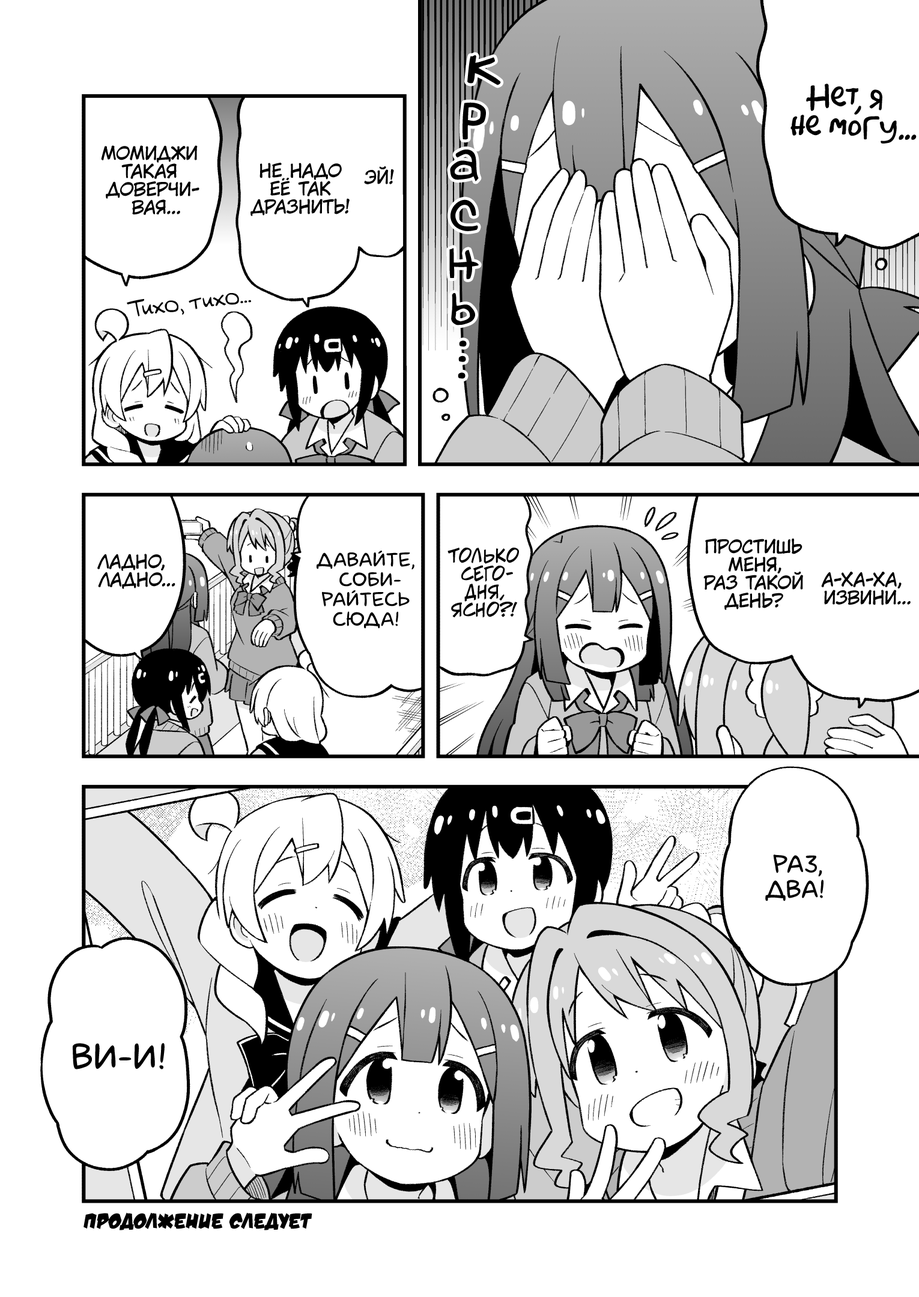
<style>
.page{position:relative;width:919px;height:1297px;background:#ffffff}
.page>*{position:absolute;margin:0}
.t1{font:64.9px "v_Augie";color:#000000}
.t2{font:28.8px "AkbarPlain";color:#000000}
.t3{font:59.5px "v_Augie";color:#000000}
.t4{font:18px "KuraiVoice2";color:#000000;text-transform:uppercase}
.t5{font:21.6px "v_Augie";color:#000000}
.t6{font:19.8px "laCartoonerie";color:#000000;text-transform:uppercase}
.t7{font:18px "v_CCJeffCampbell";color:#000000;text-transform:uppercase}
.t8{font:25.2px "laCartoonerie";color:#000000;text-transform:uppercase}
.t9{font:36px "laCartoonerie";color:#000000;text-transform:uppercase}
.t10{font:21.6px "v_DamnNoisyKids";color:#000000;text-transform:uppercase}
</style>
<div class="page">
<p class="t1" style="left:467px;top:55px;width:34px;height:30px;rotate:5deg">к</p>
<p class="t2" style="left:790px;top:83px;width:127px;height:61px;text-align:center">Нет, я<br>не могу...</p>
<p class="t3" style="left:463px;top:102px;width:23px;height:38px;rotate:7deg">р</p>
<p class="t4" style="left:101px;top:145px;width:98px;height:70px;text-align:center">Момиджи<br>такая<br>доверчи-<br>вая...</p>
<p class="t3" style="left:450px;top:150px;width:29px;height:31px;rotate:6deg">а</p>
<p class="t4" style="left:250px;top:163px;width:100px;height:53px;text-align:center">Не надо<br>её так<br>дразнить!</p>
<p class="t4" style="left:364px;top:166px;width:30px;height:18px">Эй!</p>
<p class="t3" style="left:451px;top:199px;width:27px;height:32px">с</p>
<p class="t3" style="left:449px;top:248px;width:30px;height:31px">н</p>
<p class="t5" style="left:127px;top:293px;width:124px;height:24px;rotate:-7deg">Тихо, тихо...</p>
<p class="t3" style="left:451px;top:293px;width:24px;height:33px">ь</p>
<p class="t3" style="left:459px;top:341px;width:8px;height:6px">.</p>
<p class="t3" style="left:458px;top:356px;width:8px;height:6px">.</p>
<p class="t3" style="left:458px;top:372px;width:8px;height:7px">.</p>
<p class="t4" style="left:703px;top:538px;width:100px;height:72px;text-align:center">Простишь<br>меня,<br>раз такой<br>день?</p>
<p class="t4" style="left:97px;top:554px;width:78px;height:35px;text-align:center">Ладно,<br>ладно...</p>
<p class="t6" style="left:317px;top:551px;width:97px;height:78px;text-align:center">Давайте,<br>соби-<br>райтесь<br>сюда!</p>
<p class="t7" style="left:448px;top:548px;width:71px;height:70px;text-align:center">Только<br>сего-<br>дня,<br>ясно?!</p>
<p class="t4" style="left:821px;top:572px;width:90px;height:33px;text-align:center">А-ха-ха,<br>извини...</p>
<p class="t8" style="left:765px;top:855px;width:59px;height:47px;text-align:center">Раз,<br>два!</p>
<p class="t9" style="left:73px;top:1043px;width:92px;height:27px">Ви-и!</p>
<p class="t10" style="left:83px;top:1213px;width:229px;height:18px">Продолжение следует</p>
</div>
